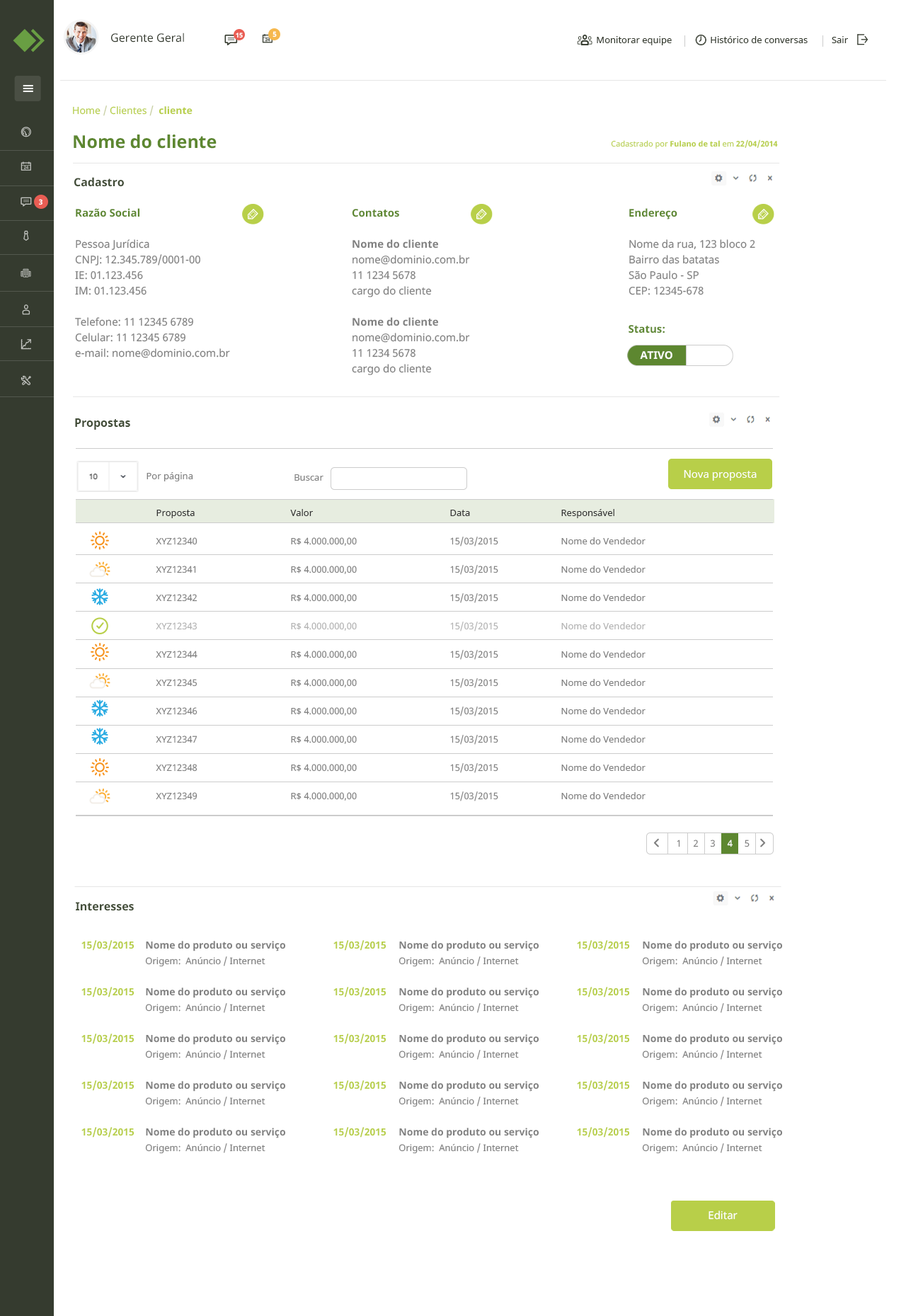
<style>
.page{position:relative;width:906px;height:1316px;background:#ffffff}
.page>*{position:absolute;margin:0}
.t1{font:11.3px "NotoSans";color:#353b2f}
.t2{font:6.4px "NotoSans-Bold";color:#ffffff}
.t3{font:7.1px "NotoSans-Bold";color:#ffffff}
.t4{font:9.2px "NotoSans";color:#353b2f}
.t5{font:9.9px "NotoSans";color:#b8cf49}
.t6{font:9.9px "NotoSans";color:#c7cfa1}
.t7{font:9.9px "NotoSans-Bold";color:#b8cf49}
.t8{font:17.7px "NotoSans-Bold";color:#5d8730}
.t9{font:7.8px "NotoSans";color:#b8cf49}
.t10{font:7.8px "NotoSans-Bold";color:#b8cf49}
.t11{font:11.3px "NotoSans-Bold";color:#424d38}
.t12{font:10.6px/15.6px "NotoSans";color:#808080}
.t13{font:10.6px/15.6px "NotoSans-Bold";color:#5d8730}
.t14{font:10.6px/15.6px "NotoSans-Bold";color:#808080}
.t15{font:10.6px "NotoSans-Bold";color:#5d8730}
.t16{font:10.6px "NotoSans-Bold";color:#ffffff}
.t17{font:9.2px "NotoSans";color:#808080}
.t18{font:10.6px "NotoSans";color:#ffffff}
.t19{font:9.2px/28.3px "NotoSans";color:#808080}
.t20{font:9.2px/28.3px "NotoSans";color:#333333}
.t21{font:9.2px/28.3px "NotoSans";color:#b3b3b3}
.t22{font:9.9px/15.6px "NotoSans-Bold";color:#b8cf49}
.t23{font:9.2px/15.6px "NotoSans";color:#808080}
.t24{font:9.9px/15.6px "NotoSans-Bold";color:#808080}
</style>
<div class="page">
<p class="t1" style="left:111px;top:33px;width:73px;height:9px">Gerente Geral</p>
<p class="t2" style="left:236px;top:33px;width:7px;height:5px">15</p>
<p class="t3" style="left:273px;top:31px;width:4px;height:7px">5</p>
<p class="t4" style="left:597px;top:36px;width:251px;height:9px">Monitorar equipe                Histórico de conversas          Sair</p>
<p class="t5" style="left:73px;top:105px;width:120px;height:11px">Home <span class="t6">/</span> Clientes <span class="t6">/  </span><span class="t7">cliente</span></p>
<p class="t8" style="left:74px;top:135px;width:143px;height:14px">Nome do cliente</p>
<p class="t9" style="left:611px;top:139px;width:167px;height:10px">Cadastrado por<span class="t10"> Fulano de tal </span>em<span class="t10"> 22/04/2014</span></p>
<p class="t11" style="left:74px;top:177px;width:50px;height:10px">Cadastro</p>
<p class="t3" style="left:39px;top:199px;width:3px;height:6px">3</p>
<p class="t12" style="left:75px;top:208px;width:155px;height:150px"><span class="t13">Razão Social<br><br></span>Pessoa Jurídica<br>CNPJ: 12.345.789/0001-00<br>IE: 01.123.456<br>IM: 01.123.456<br><br>Telefone: 11 12345 6789<br>Celular: 11 12345 6789<br>e-mail: nome@dominio.com.br</p>
<p class="t12" style="left:352px;top:209px;width:118px;height:166px"><span class="t13">Contatos<br><br></span><span class="t14">Nome do cliente<br></span>nome@dominio.com.br<br>11 1234 5678<br>cargo do cliente<br><br><span class="t14">Nome do cliente<br></span>nome@dominio.com.br<br>11 1234 5678<br>cargo do cliente</p>
<p class="t12" style="left:629px;top:208px;width:126px;height:87px"><span class="t13">Endereço<br><br></span>Nome da rua, 123 bloco 2<br>Bairro das batatas<br>São Paulo - SP<br>CEP: 12345-678</p>
<p class="t15" style="left:629px;top:325px;width:36px;height:8px">Status:</p>
<p class="t16" style="left:640px;top:351px;width:33px;height:9px">ATIVO</p>
<p class="t11" style="left:75px;top:418px;width:55px;height:12px">Propostas</p>
<p class="t17" style="left:147px;top:472px;width:46px;height:9px">Por página</p>
<p class="t18" style="left:684px;top:470px;width:73px;height:11px">Nova proposta</p>
<p class="t17" style="left:294px;top:474px;width:30px;height:7px">Buscar</p>
<p class="t19" style="left:156px;top:510px;width:42px;height:290px"><span class="t20">Proposta<br></span>XYZ12340<br>XYZ12341<br>XYZ12342<br><span class="t21">XYZ12343<br></span>XYZ12344<br>XYZ12345<br>XYZ12346<br>XYZ12347<br>XYZ12348<br>XYZ12349</p>
<p class="t19" style="left:290px;top:509px;width:67px;height:292px"><span class="t20">Valor<br></span>R$ 4.000.000,00<br>R$ 4.000.000,00<br>R$ 4.000.000,00<br><span class="t21">R$ 4.000.000,00<br></span>R$ 4.000.000,00<br>R$ 4.000.000,00<br>R$ 4.000.000,00<br>R$ 4.000.000,00<br>R$ 4.000.000,00<br>R$ 4.000.000,00</p>
<p class="t19" style="left:450px;top:510px;width:48px;height:291px"><span class="t20">Data<br></span>15/03/2015<br>15/03/2015<br>15/03/2015<br><span class="t21">15/03/2015<br></span>15/03/2015<br>15/03/2015<br>15/03/2015<br>15/03/2015<br>15/03/2015<br>15/03/2015</p>
<p class="t19" style="left:561px;top:509px;width:85px;height:290px"><span class="t20">Responsável<br></span>Nome do Vendedor<br>Nome do Vendedor<br>Nome do Vendedor<br><span class="t21">Nome do Vendedor<br></span>Nome do Vendedor<br>Nome do Vendedor<br>Nome do Vendedor<br>Nome do Vendedor<br>Nome do Vendedor<br>Nome do Vendedor</p>
<p class="t11" style="left:76px;top:902px;width:58px;height:9px">Interesses</p>
<p class="t22" style="left:81px;top:940px;width:53px;height:198px;text-align:right">15/03/2015<br><br><br>15/03/2015<br><br><br>15/03/2015 <br><br><br>15/03/2015<br><br><br>15/03/2015</p>
<p class="t23" style="left:145px;top:941px;width:140px;height:213px"><span class="t24">Nome do produto ou serviço   <br></span>Origem:  Anúncio / Internet<br><br><span class="t24">Nome do produto ou serviço   <br></span>Origem:  Anúncio / Internet<br><br><span class="t24">Nome do produto ou serviço   <br></span>Origem:  Anúncio / Internet<br><br><span class="t24">Nome do produto ou serviço   <br></span>Origem:  Anúncio / Internet<br><br><span class="t24">Nome do produto ou serviço   <br></span>Origem:  Anúncio / Internet</p>
<p class="t22" style="left:333px;top:940px;width:53px;height:198px;text-align:right">15/03/2015<br><br><br>15/03/2015<br><br><br>15/03/2015 <br><br><br>15/03/2015<br><br><br>15/03/2015</p>
<p class="t23" style="left:399px;top:941px;width:140px;height:213px"><span class="t24">Nome do produto ou serviço   <br></span>Origem:  Anúncio / Internet<br><br><span class="t24">Nome do produto ou serviço   <br></span>Origem:  Anúncio / Internet<br><br><span class="t24">Nome do produto ou serviço   <br></span>Origem:  Anúncio / Internet<br><br><span class="t24">Nome do produto ou serviço   <br></span>Origem:  Anúncio / Internet<br><br><span class="t24">Nome do produto ou serviço   <br></span>Origem:  Anúncio / Internet</p>
<p class="t22" style="left:577px;top:940px;width:52px;height:198px;text-align:right">15/03/2015<br><br><br>15/03/2015<br><br><br>15/03/2015 <br><br><br>15/03/2015<br><br><br>15/03/2015</p>
<p class="t23" style="left:642px;top:941px;width:140px;height:213px"><span class="t24">Nome do produto ou serviço   <br></span>Origem:  Anúncio / Internet<br><br><span class="t24">Nome do produto ou serviço   <br></span>Origem:  Anúncio / Internet<br><br><span class="t24">Nome do produto ou serviço   <br></span>Origem:  Anúncio / Internet<br><br><span class="t24">Nome do produto ou serviço   <br></span>Origem:  Anúncio / Internet<br><br><span class="t24">Nome do produto ou serviço   <br></span>Origem:  Anúncio / Internet</p>
<p class="t18" style="left:709px;top:1211px;width:29px;height:9px">Editar</p>
</div>
